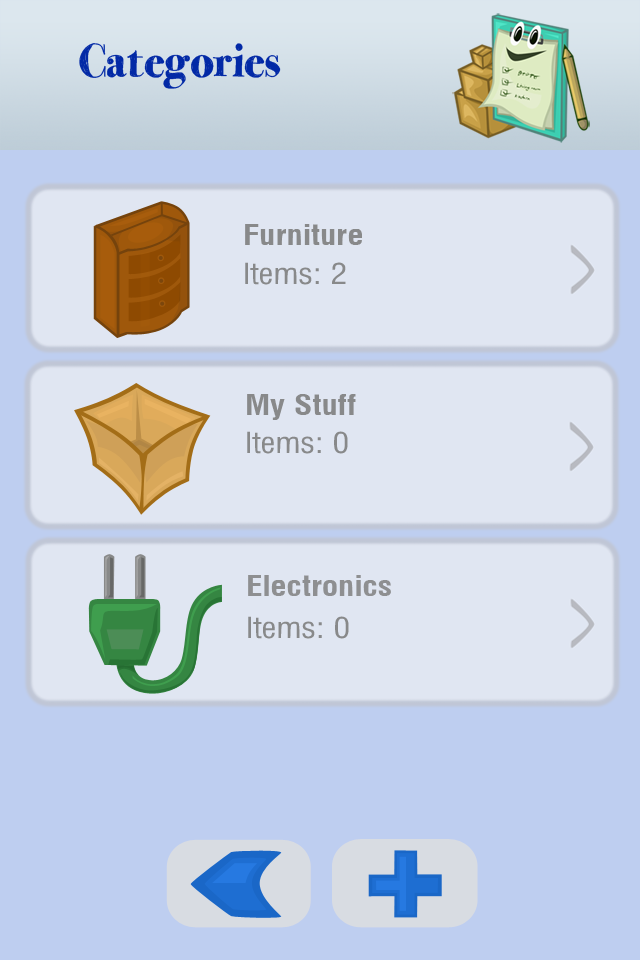
<style>
.page{position:relative;width:640px;height:960px;background:#e0e6f2}
.page>*{position:absolute;margin:0}
.t1{font:28.3px "MilfordBold";color:#88898a}
.t2{font:28.3px "Milford";color:#88898a}
.t3{font:28.3px "MilfordBold";color:#8e8f91}
</style>
<div class="page">
<p class="t1" style="left:245px;top:224px;width:117px;height:21px">Furniture</p>
<p class="t2" style="left:245px;top:262px;width:101px;height:23px">Items: 2</p>
<p class="t1" style="left:247px;top:394px;width:109px;height:26px">My Stuff</p>
<p class="t2" style="left:247px;top:431px;width:101px;height:23px">Items: 0</p>
<p class="t3" style="left:248px;top:575px;width:143px;height:21px">Electronics</p>
<p class="t2" style="left:248px;top:616px;width:101px;height:23px">Items: 0</p>
</div>
